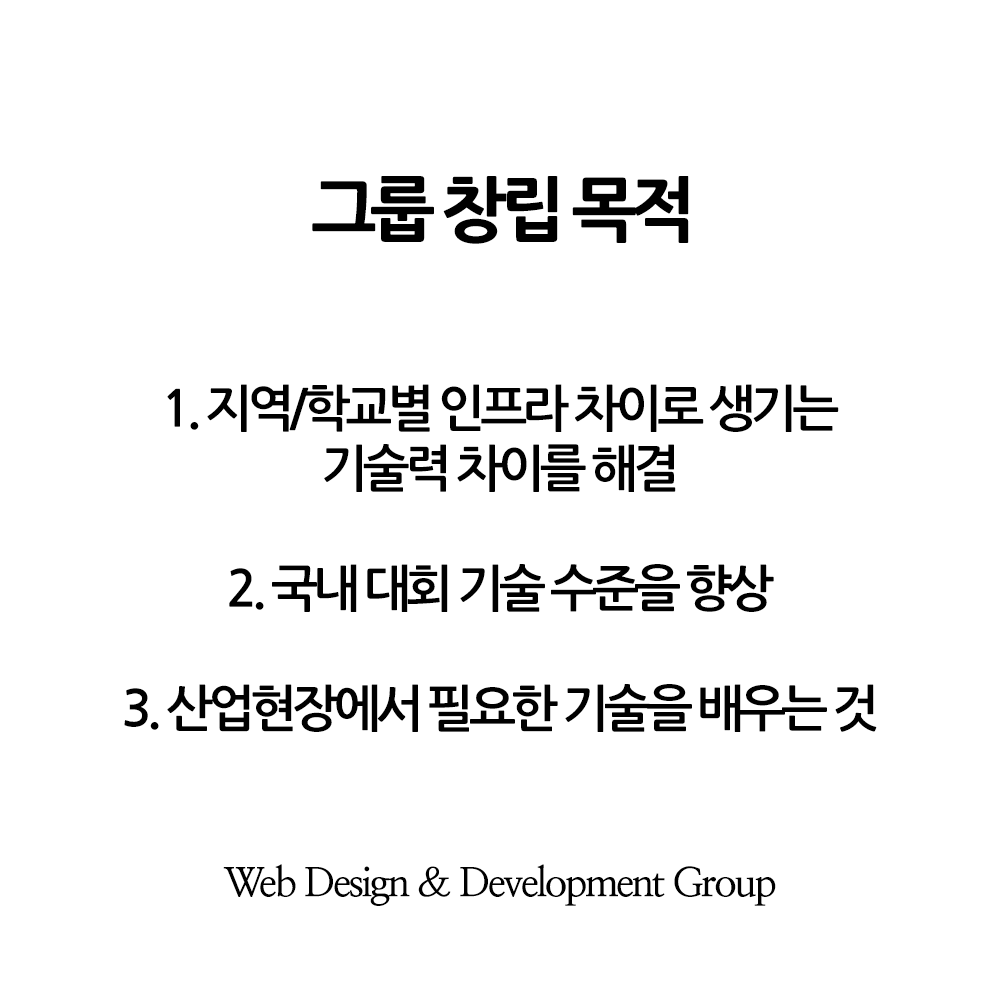
<style>
.page{position:relative;width:1000px;height:1000px;background:#ffffff}
.page>*{position:absolute;margin:0}
.t1{font:70px "NanumGothicExtraBold";letter-spacing:-0.1em;color:#000000}
.t2{font:50px "NanumGothicBold";letter-spacing:-0.1em;color:#000000}
.t3{font:40px "NanumMyeongjoBold";letter-spacing:-0.06em;color:#000000}
</style>
<div class="page">
<p class="t1" style="left:312px;top:176px;width:377px;height:68px">그룹 창립 목적</p>
<p class="t2" style="left:124px;top:384px;width:753px;height:348px;text-align:center">1. 지역/학교별 인프라 차이로 생기는<br>기술력 차이를 해결<br><br>2. 국내 대회 기술 수준을 향상<br><br>3. 산업현장에서 필요한 기술을 배우는 것</p>
<p class="t3" style="left:223px;top:864px;width:553px;height:42px">Web Design &amp; Development Group</p>
</div>
